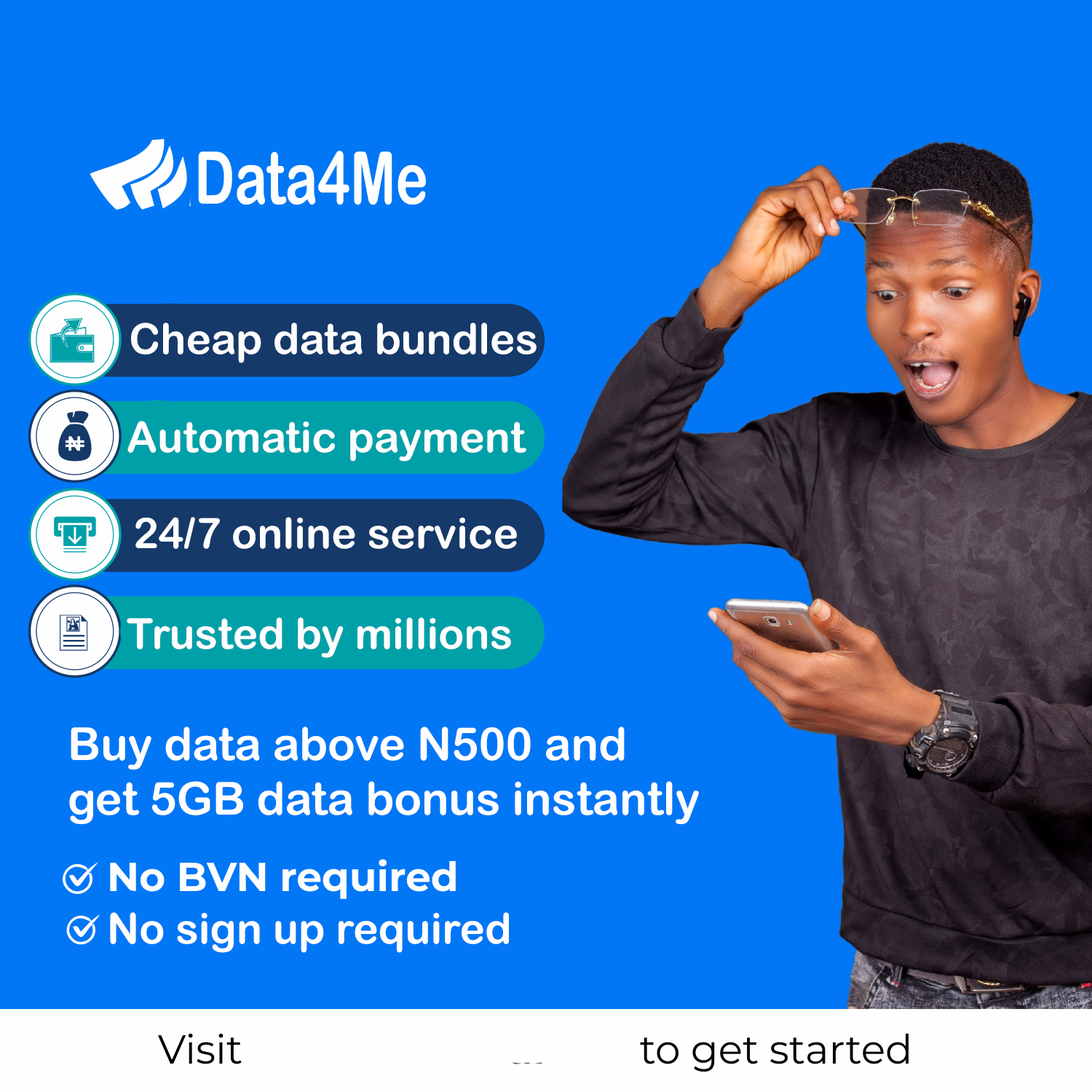
<style>
.page{position:relative;width:1092px;height:1092px;background:#0177f6}
.page>*{position:absolute;margin:0}
.t1{font:42.5px "ArialRoundedMTBold";color:#fefefe}
.t2{font:45.5px "ArialRoundedMTBold";color:#fefefe}
</style>
<div class="page">
<p class="t1" style="left:131px;top:322px;width:406px;height:41px">Cheap data bundles</p>
<p class="t1" style="left:127px;top:421px;width:399px;height:41px">Automatic payment</p>
<p class="t1" style="left:135px;top:517px;width:382px;height:32px">24/7 online service</p>
<p class="t1" style="left:127px;top:617px;width:384px;height:41px">Trusted by millions</p>
<p class="t2" style="left:69px;top:727px;width:630px;height:97px">Buy data above N500 and<br>get 5GB data bonus instantly</p>
<p class="t1" style="left:110px;top:912px;width:399px;height:41px">No sign up required</p>
</div>
